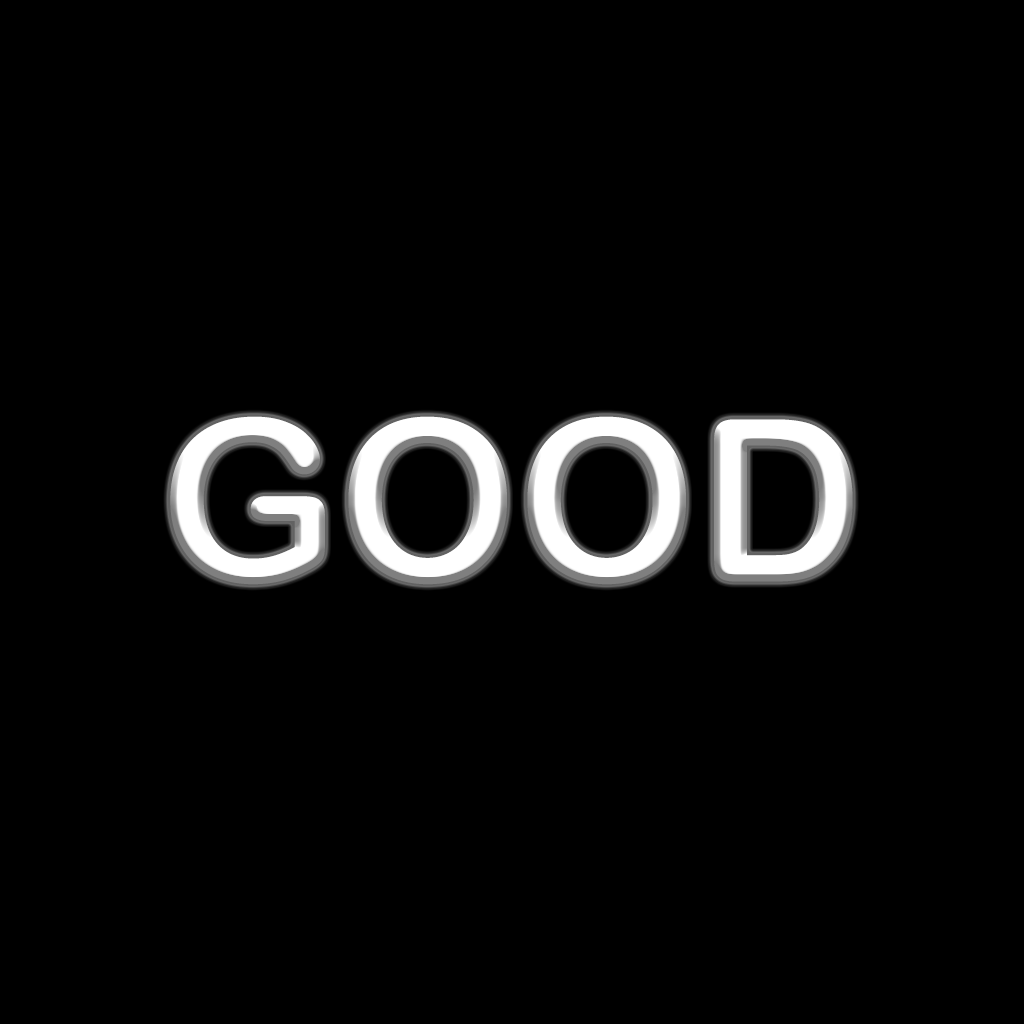
<style>
.page{position:relative;width:1024px;height:1024px;background:#000000}
.page>*{position:absolute;margin:0}
.t1{font:226px "ArialRoundedMTBold";color:#ffffff}
</style>
<div class="page">
<p class="t1" style="left:170px;top:416px;width:683px;height:169px">GOOD</p>
</div>
